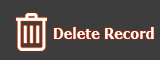
<style>
.page{position:relative;width:160px;height:60px;background:#3d3d3d}
.page>*{position:absolute;margin:0}
.t1{font:14.6px "Verdana-Bold";color:#fdfcfc;scale:0.89 1}
</style>
<div class="page">
<p class="t1" style="left:54px;top:27px;width:100px;height:12px">Delete Record</p>
</div>
